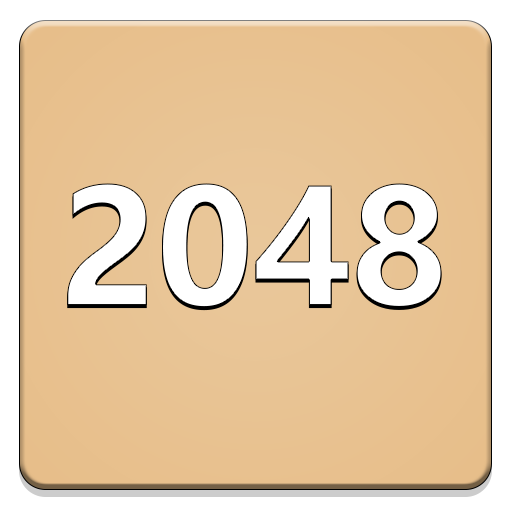
<style>
.page{position:relative;width:512px;height:512px;background:#ffffff}
.page>*{position:absolute;margin:0}
.t1{font:158px "MicrosoftYaHei-Bold";color:#ffffff}
</style>
<div class="page">
<p class="t1" style="left:67px;top:183px;width:375px;height:125px">2048</p>
</div>
